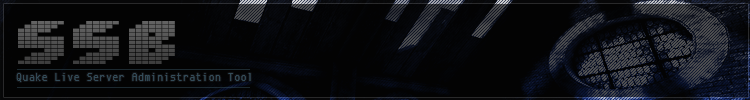
<style>
.page{position:relative;width:750px;height:100px;background:#030303}
.page>*{position:absolute;margin:0}
.t1{font:75px "Loudnoise";color:#505050}
.t2{font:11.2px "EnvyCodeR";letter-spacing:0.025em;color:#344c59}
</style>
<div class="page">
<p class="t1" style="left:18px;top:21px;width:157px;height:43px">ssb</p>
<p class="t2" style="left:16px;top:73px;width:235px;height:9px">Quake Live Server Administration Tool</p>
</div>
